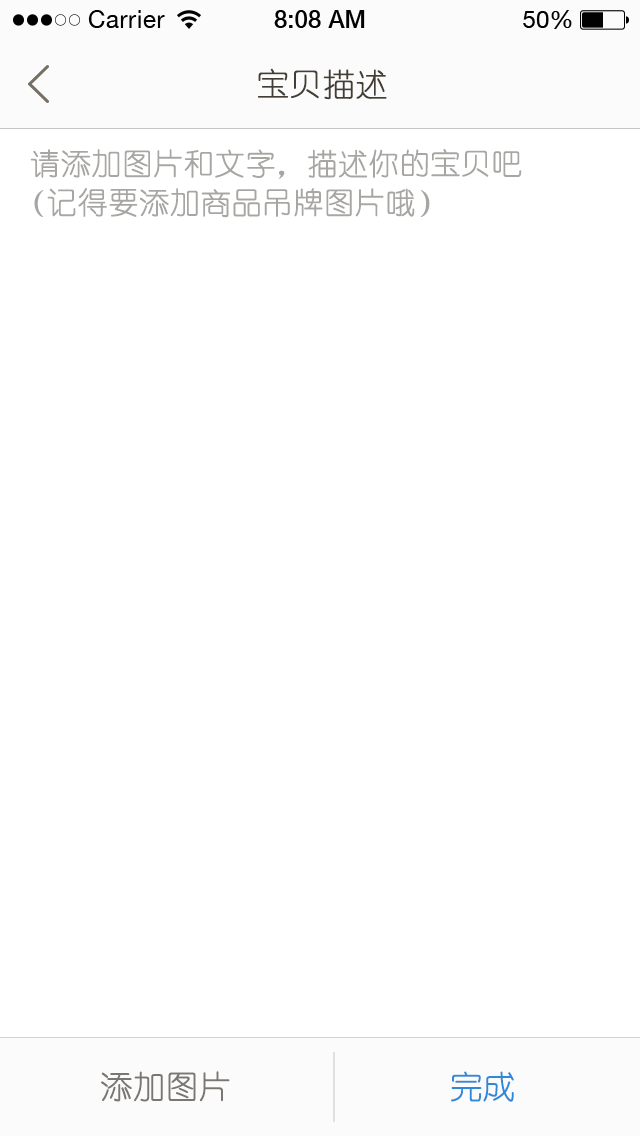
<style>
.page{position:relative;width:640px;height:1136px;background:#ffffff}
.page>*{position:absolute;margin:0}
.t1{font:32px "YouYuan";color:#433d33;text-transform:uppercase;font-weight:bold}
.t2{font:30px "YouYuan";color:#a7a6a3;text-transform:uppercase;font-weight:bold}
.t3{font:32px "YouYuan";color:#7a7772;text-transform:uppercase;font-weight:bold}
.t4{font:32px "YouYuan";color:#2f88da;text-transform:uppercase;font-weight:bold}
</style>
<div class="page">
<p class="t1" style="left:258px;top:68px;width:129px;height:32px">宝贝描述</p>
<p class="t2" style="left:30px;top:149px;width:492px;height:30px">请添加图片和文字，描述你的宝贝吧</p>
<p class="t2" style="left:34px;top:188px;width:396px;height:30px">（记得要添加商品吊牌图片哦）</p>
<p class="t3" style="left:101px;top:1071px;width:129px;height:31px">添加图片</p>
<p class="t4" style="left:451px;top:1071px;width:63px;height:31px">完成</p>
</div>
